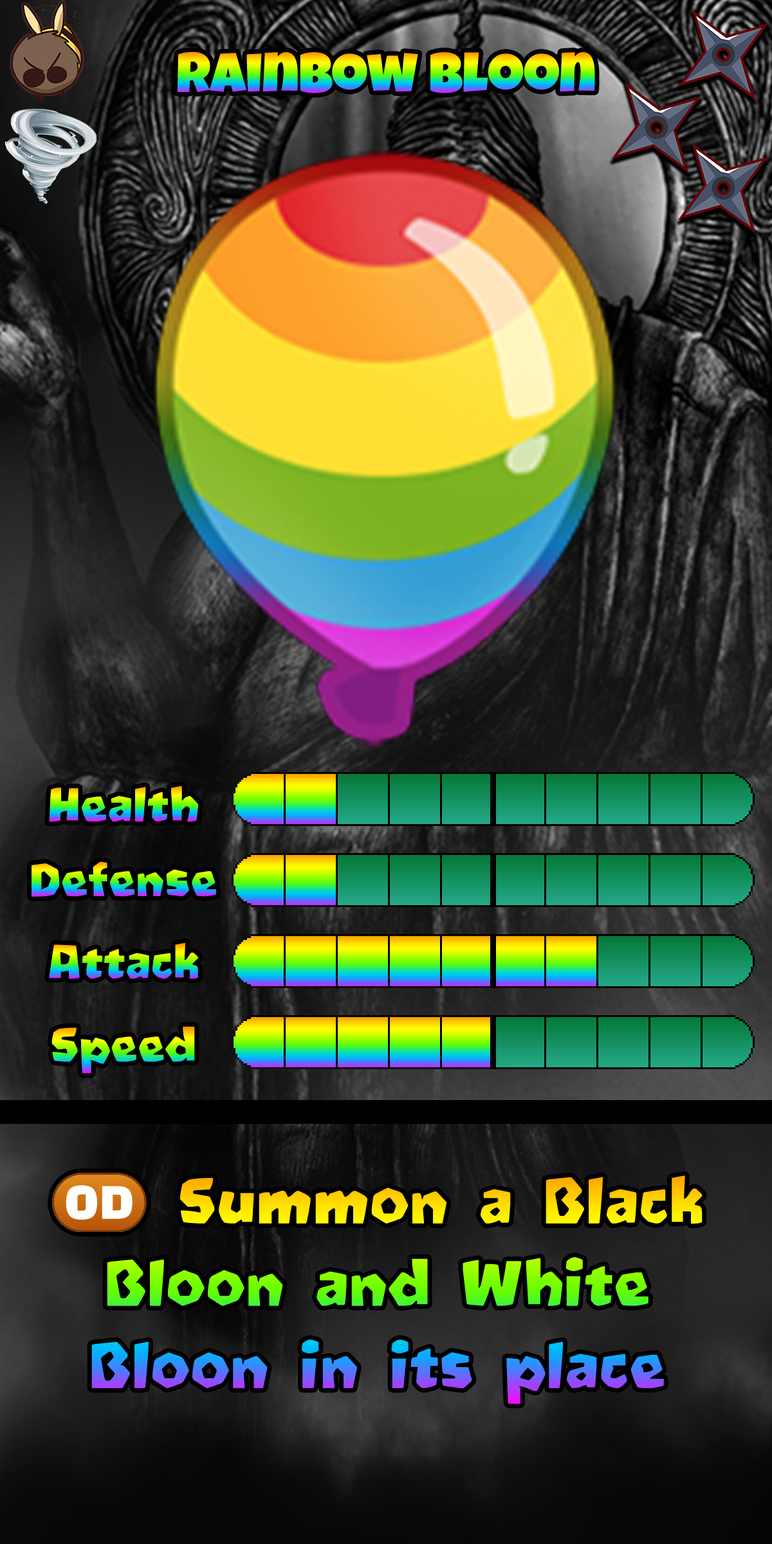
<style>
.page{position:relative;width:772px;height:1544px}
.page>*{position:absolute;margin:0}
.t1{font:96.5px "LuckiestGuy-Regular"}
.t2{font:77.2px "Oetztype"}
.t3{font:103.6px/82.4px "Oetztype"}
.t4{font:103.6px/82.4px "stoogedings-Regular"}
</style>
<div class="page">
<p class="t1" style="left:177px;top:51px;width:418px;height:42px">Rainbow Bloon</p>
<p class="t2" style="left:49px;top:786px;width:150px;height:36px">Health</p>
<p class="t2" style="left:32px;top:862px;width:184px;height:35px">Defense</p>
<p class="t2" style="left:49px;top:943px;width:149px;height:36px">Attack</p>
<p class="t2" style="left:51px;top:1026px;width:144px;height:48px">Speed</p>
<p class="t3" style="left:52px;top:1173px;width:651px;height:231px;text-align:center"><span class="t4">(OD)</span> Summon a Black Bloon and White Bloon in its place</p>
</div>
